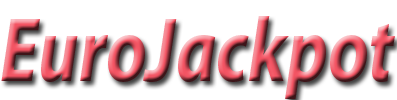
<style>
.page{position:relative;width:397px;height:100px;background:#ffffff}
.page>*{position:absolute;margin:0}
.t1{font:92px "MyriadPro-BoldIt";scale:0.79 1}
</style>
<div class="page">
<p class="t1" style="left:1px;top:16px;width:394px;height:83px">EuroJackpot</p>
</div>
